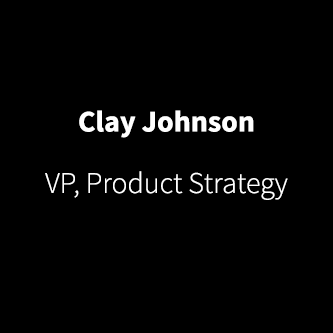
<style>
.page{position:relative;width:333px;height:333px;background:#000000}
.page>*{position:absolute;margin:0}
.t1{font:29.9px "SourceSansPro-Bold";color:#ffffff}
.t2{font:29.9px "SourceSansPro-Light";color:#ffffff}
</style>
<div class="page">
<p class="t1" style="left:79px;top:110px;width:175px;height:28px">Clay Johnson</p>
<p class="t2" style="left:45px;top:171px;width:243px;height:29px">VP, Product Strategy</p>
</div>
